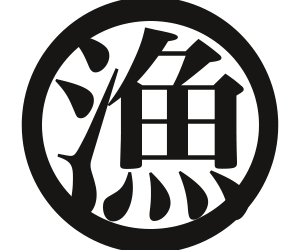
<style>
.page{position:relative;width:300px;height:250px;background:#ffffff}
.page>*{position:absolute;margin:0}
.t1{font:209px "HiraMinProN-W6";letter-spacing:-0.06em;color:#171615}
</style>
<div class="page">
<p class="t1" style="left:55px;top:27px;width:195px;height:195px">漁</p>
</div>
